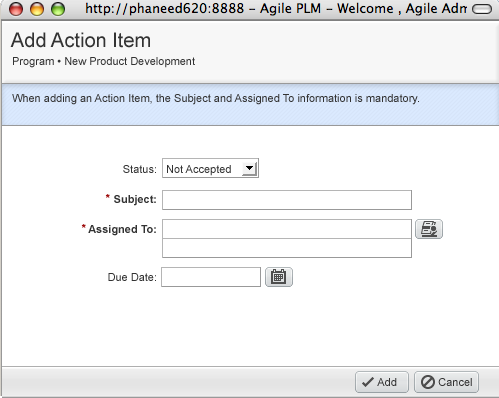
<style>
.page{position:relative;width:499px;height:398px;background:#ffffff}
.page>*{position:absolute;margin:0}
.t1{font:20px "ArialMT";color:#333333}
.t2{font:11px "ArialMT";color:#333333}
.t3{font:11px/30px "Arial-BoldMT";color:#333333}
.t4{font:11px/30px "ArialMT";color:#333333}
.t5{font:11px "Arial-BoldMT";color:#990000}
</style>
<div class="page">
<p class="t1" style="left:10px;top:32px;width:140px;height:16px">Add Action Item</p>
<p class="t2" style="left:13px;top:57px;width:182px;height:11px">Program • New Product Development</p>
<p class="t2" style="left:12px;top:94px;width:407px;height:11px">When adding an Action Item, the Subject and Assigned To information is mandatory.</p>
<p class="t3" style="left:88px;top:165px;width:68px;height:71px;text-align:right"><span class="t4">Status:<br></span>Subject:<br>Assigned To:</p>
<p class="t2" style="left:167px;top:165px;width:64px;height:11px">Not Accepted</p>
<p class="t5" style="left:105px;top:194px;width:5px;height:4px">*</p>
<p class="t5" style="left:81px;top:224px;width:5px;height:4px">*</p>
<p class="t2" style="left:108px;top:273px;width:48px;height:8px">Due Date:</p>
<p class="t2" style="left:377px;top:378px;width:20px;height:8px">Add</p>
<p class="t2" style="left:438px;top:378px;width:34px;height:8px">Cancel</p>
</div>
